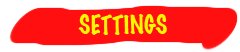
<style>
.page{position:relative;width:240px;height:52px;background:#ff0f0f}
.page>*{position:absolute;margin:0}
.t1{font:24px "MarkerFelt-Thin";color:#fff600}
</style>
<div class="page">
<p class="t1" style="left:78px;top:14px;width:89px;height:21px">SETTINGS</p>
</div>
